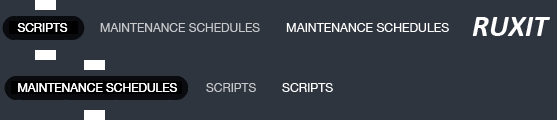
<style>
.page{position:relative;width:557px;height:120px;background:#2f353e}
.page>*{position:absolute;margin:0}
.t1{font:30px "Calibri-BoldItalic";color:#ffffff}
.t2{font:12px "HelveticaNeue";color:#ffffff}
.t3{font:12px "HelveticaNeue";color:#c7c8cb}
</style>
<div class="page">
<p class="t1" style="left:472px;top:17px;width:78px;height:19px">RUXIT</p>
<p class="t2" style="left:17px;top:23px;width:51px;height:9px">SCRIPTS</p>
<p class="t2" style="left:17px;top:23px;width:51px;height:9px">SCRIPTS</p>
<p class="t3" style="left:100px;top:23px;width:160px;height:9px">MAINTENANCE SCHEDULES</p>
<p class="t2" style="left:286px;top:23px;width:163px;height:9px">MAINTENANCE SCHEDULES</p>
<p class="t2" style="left:18px;top:83px;width:159px;height:9px">MAINTENANCE SCHEDULES</p>
<p class="t2" style="left:18px;top:83px;width:159px;height:9px">MAINTENANCE SCHEDULES</p>
<p class="t3" style="left:206px;top:83px;width:50px;height:9px">SCRIPTS</p>
<p class="t2" style="left:282px;top:83px;width:51px;height:9px">SCRIPTS</p>
</div>
